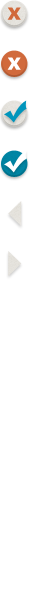
<style>
.page{position:relative;width:30px;height:600px;background:#ffffff}
.page>*{position:absolute;margin:0}
.t1{font:23.8px "UniversLTStd-Bold";letter-spacing:0.01em;color:#d16a3c}
.t2{font:23.8px "UniversLTStd-Bold";letter-spacing:0.01em;color:#ffffff}
</style>
<div class="page">
<p class="t1" style="left:7px;top:7px;width:14px;height:13px">x</p>
<p class="t2" style="left:7px;top:57px;width:14px;height:13px">x</p>
</div>
